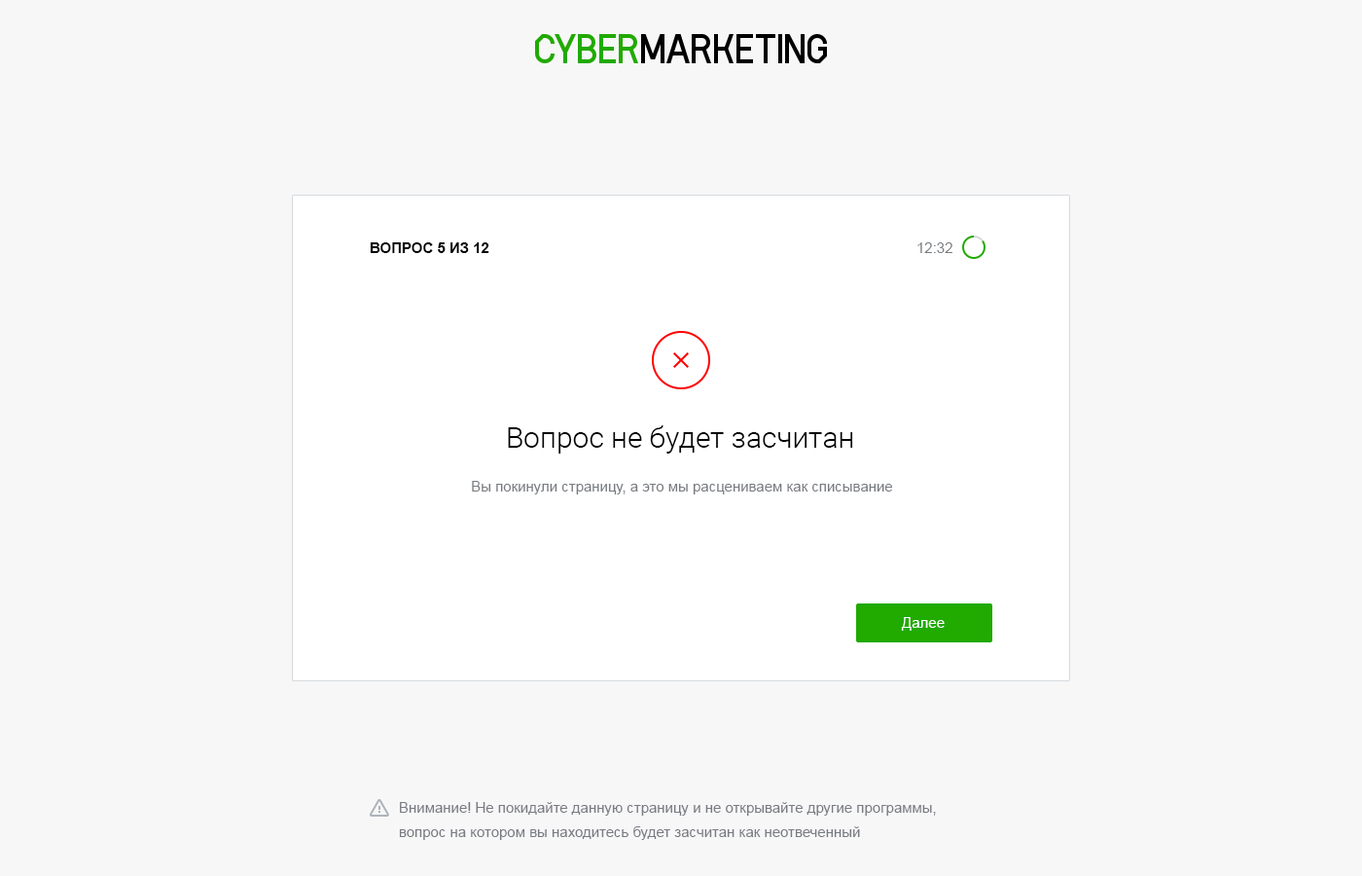
<style>
.page{position:relative;width:1362px;height:876px;background:#f7f7f8}
.page>*{position:absolute;margin:0}
.t1{font:14.6px "Arial-BoldMT";color:#000000;text-transform:uppercase}
.t2{font:14.6px "ArialMT";color:#787b81}
.t3{font:29.2px "Roboto-Light";color:#000000}
.t4{font:14.6px "ArialMT";color:#ffffff}
.t5{font:14.6px/24.3px "ArialMT";color:#787b81}
</style>
<div class="page">
<p class="t1" style="left:370px;top:242px;width:119px;height:11px">Вопрос 5 из 12</p>
<p class="t2" style="left:917px;top:242px;width:35px;height:11px">12:32</p>
<p class="t3" style="left:508px;top:425px;width:345px;height:28px">Вопрос не будет засчитан</p>
<p class="t2" style="left:472px;top:481px;width:421px;height:13px">Вы покинули страницу, а это мы расцениваем как списывание</p>
<p class="t4" style="left:901px;top:617px;width:44px;height:13px">Далее</p>
<p class="t5" style="left:399px;top:802px;width:537px;height:38px">Внимание! Не покидайте данную страницу и не открывайте другие программы, <br>вопрос на котором вы находитесь будет засчитан как неотвеченный</p>
</div>
